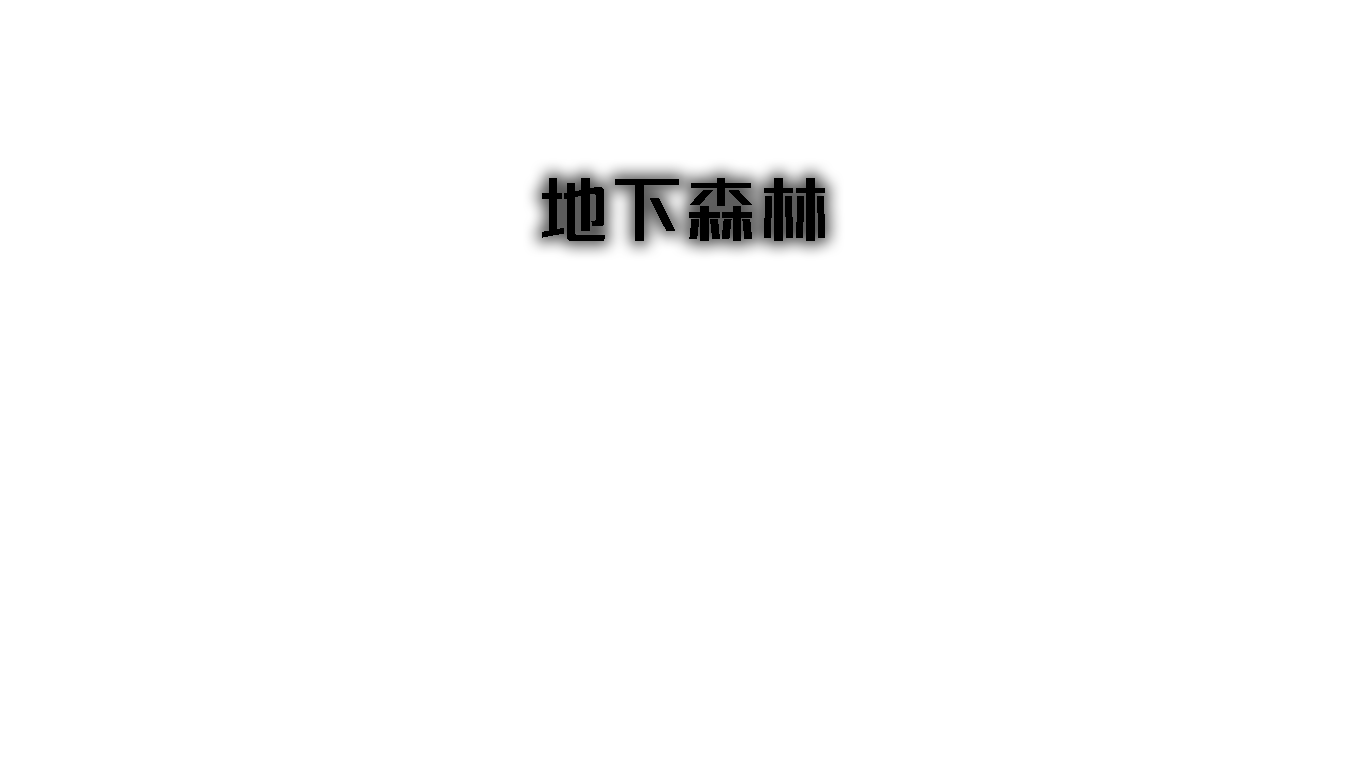
<style>
.page{position:relative;width:1366px;height:768px;background:#ffffff}
.page>*{position:absolute;margin:0}
.t1{font:72px "YPCX--GB1-0";letter-spacing:0.02em;color:#000000}
</style>
<div class="page">
<p class="t1" style="left:542px;top:178px;width:283px;height:63px">地下森林</p>
</div>
